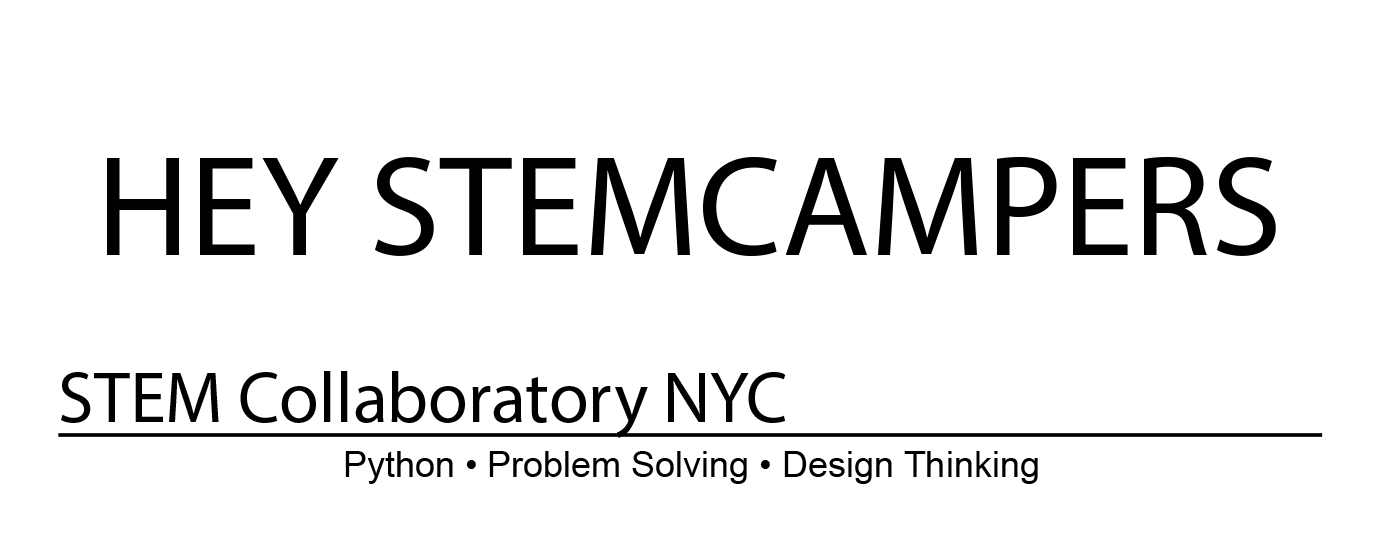
<style>
.page{position:relative;width:1383px;height:537px;background:#ffffff}
.page>*{position:absolute;margin:0}
.t1{font:144px "MyriadPro-Regular";color:#000000}
.t2{font:72px "MyriadPro-Regular";color:#000000;text-decoration:underline}
.t3{font:36px "ArialMT";color:#000000}
</style>
<div class="page">
<p class="t1" style="left:107px;top:156px;width:1169px;height:100px">HEY STEMCAMPERS</p>
<p class="t2" style="left:58px;top:371px;width:1265px;height:67px">STEM Collaboratory NYC</p>
<p class="t3" style="left:345px;top:451px;width:693px;height:33px">Python • Problem Solving • Design Thinking</p>
</div>
